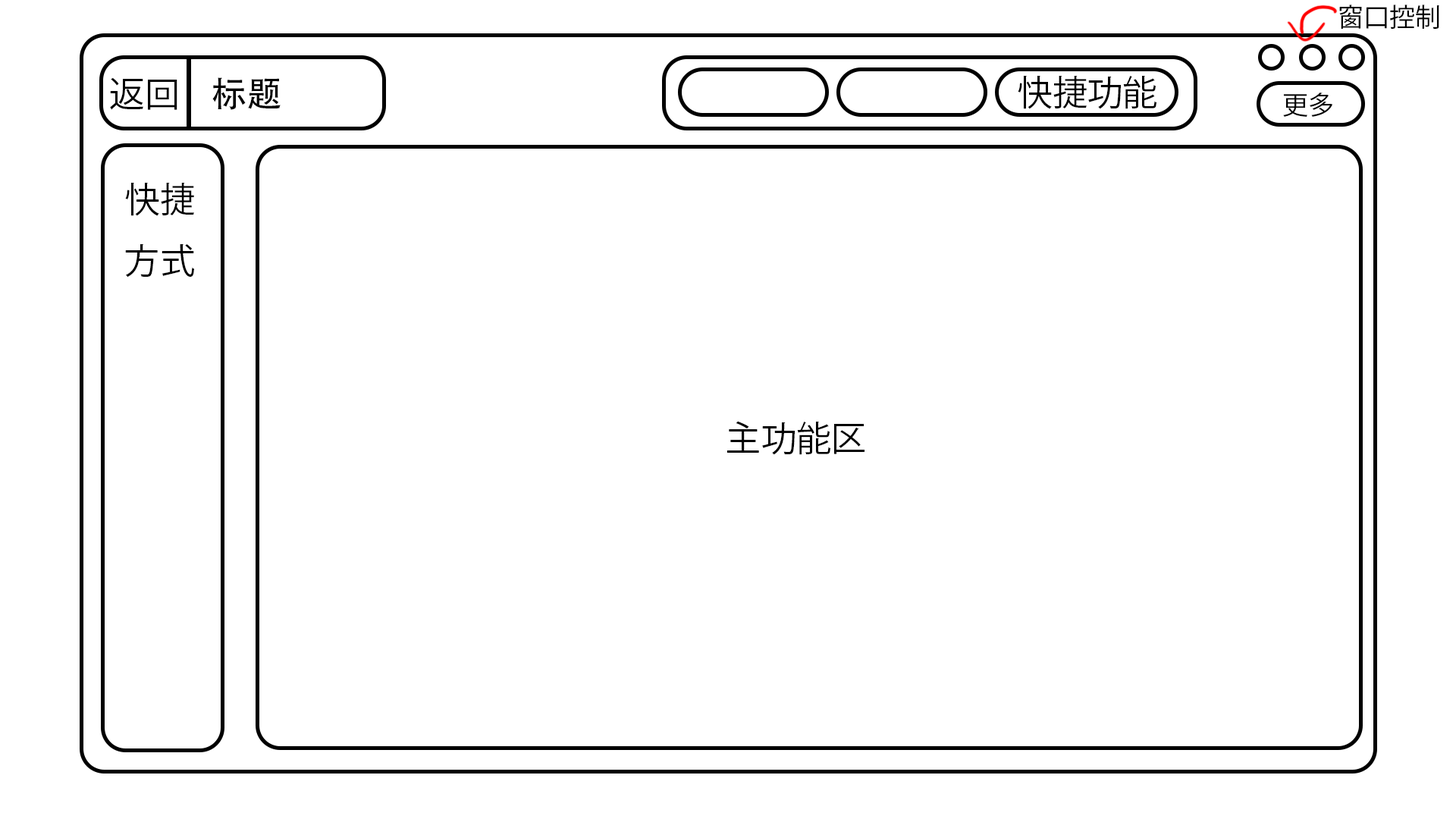
<style>
.page{position:relative;width:1456px;height:819px;background:#ffffff}
.page>*{position:absolute;margin:0}
.t1{font:25.7px "KozGoPr6N-Regular";color:#000000}
.t2{font:35.1px "KozGoPr6N-Regular";color:#000000}
.t3{font:35.1px "AdobeHeitiStd-Regular";color:#000000}
</style>
<div class="page">
<p class="t1" style="left:1339px;top:5px;width:100px;height:24px">窗口控制</p>
<p class="t2" style="left:110px;top:77px;width:67px;height:33px">返回</p>
<p class="t3" style="left:212px;top:77px;width:69px;height:33px">标题</p>
<p class="t2" style="left:1018px;top:75px;width:138px;height:34px">快捷功能</p>
<p class="t1" style="left:1283px;top:93px;width:50px;height:24px">更多</p>
<p class="t2" style="left:125px;top:182px;width:69px;height:96px">快捷<br>方式</p>
<p class="t2" style="left:727px;top:421px;width:137px;height:34px">主功能区</p>
</div>
